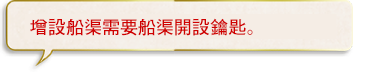
<style>
.page{position:relative;width:381px;height:72px;background:#ffffff}
.page>*{position:absolute;margin:0}
.t1{font:18px "FutoGoB101Pr5-Bold";color:#d00000}
</style>
<div class="page">
<p class="t1" style="left:30px;top:18px;width:223px;height:18px">增設船渠需要船渠開設鑰匙。</p>
</div>
